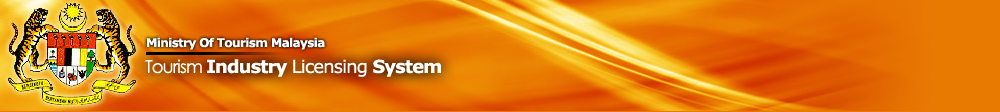
<style>
.page{position:relative;width:1000px;height:112px}
.page>*{position:absolute;margin:0}
.t1{font:12px "Verdana-Bold";letter-spacing:-0.05em;color:#ffffff}
.t2{font:18px "Verdana";letter-spacing:-0.05em;color:#ffffff}
.t3{font:18px "CenturyGothic";letter-spacing:-0.05em;color:#ffffff}
.t4{font:18px "Verdana-Bold";letter-spacing:-0.05em;color:#ffffff}
</style>
<div class="page">
<p class="t1" style="left:147px;top:37px;width:178px;height:13px">Ministry Of Tourism Malaysia</p>
<p class="t2" style="left:145px;top:59px;width:296px;height:18px"><span class="t3">Tourism </span><span class="t4">Industry </span>Licensing <span class="t4">System</span></p>
</div>
